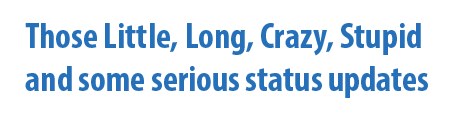
<style>
.page{position:relative;width:458px;height:120px;background:#ffffff}
.page>*{position:absolute;margin:0}
.t1{font:36px "MyriadPro-BoldCond";color:#2670b9}
</style>
<div class="page">
<p class="t1" style="left:25px;top:23px;width:403px;height:75px">Those Little, Long, Crazy, Stupid<br>and some serious status updates</p>
</div>
